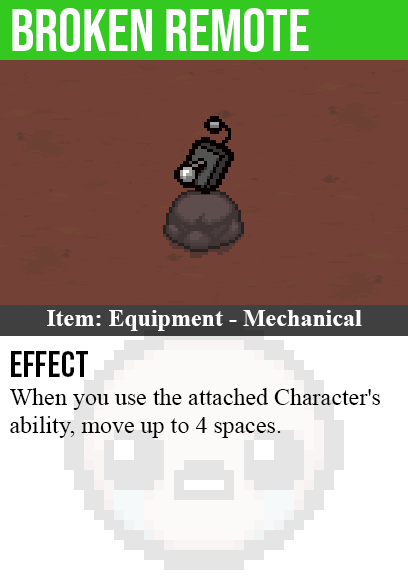
<style>
.page{position:relative;width:408px;height:585px;background:#734136}
.page>*{position:absolute;margin:0}
.t1{font:60px "BebasNeue-Regular";color:#ffffff}
.t2{font:24px "TimesNewRomanPS-BoldMT";color:#ffffff}
.t3{font:36px "BebasNeue-Regular";color:#000000}
.t4{font:24px "TimesNewRomanPSMT";color:#000000}
</style>
<div class="page">
<p class="t1" style="left:12px;top:8px;width:297px;height:44px">broken remote</p>
<p class="t2" style="left:47px;top:310px;width:315px;height:21px">Item: Equipment - Mechanical</p>
<p class="t3" style="left:11px;top:351px;width:77px;height:26px">effect</p>
<p class="t4" style="left:9px;top:388px;width:371px;height:50px">When you use the attached Character's<br>ability, move up to 4 spaces.</p>
</div>
